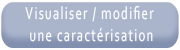
<style>
.page{position:relative;width:180px;height:50px;background:#aab5cc}
.page>*{position:absolute;margin:0}
.t1{font:18px "Corbel";letter-spacing:0.1em;color:#ffffff;scale:0.71 1}
</style>
<div class="page">
<p class="t1" style="left:25px;top:5px;width:129px;height:37px;text-align:center">Visualiser / modifier<br> une caractérisation</p>
</div>
